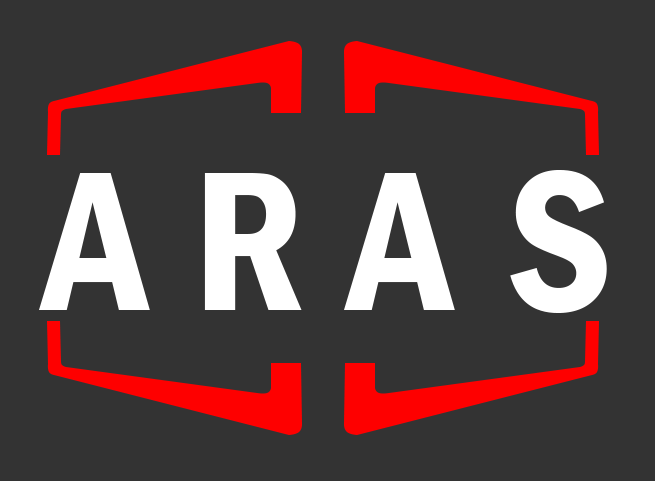
<style>
.page{position:relative;width:655px;height:481px;background:#333333}
.page>*{position:absolute;margin:0}
.t1{font:206.1px "FranklinGothic-DemiCond";color:#ffffff}
</style>
<div class="page">
<p class="t1" style="left:39px;top:173px;width:111px;height:137px">A</p>
<p class="t1" style="left:204px;top:173px;width:98px;height:137px">R</p>
<p class="t1" style="left:344px;top:173px;width:111px;height:137px">A</p>
<p class="t1" style="left:510px;top:170px;width:97px;height:143px">S</p>
</div>
